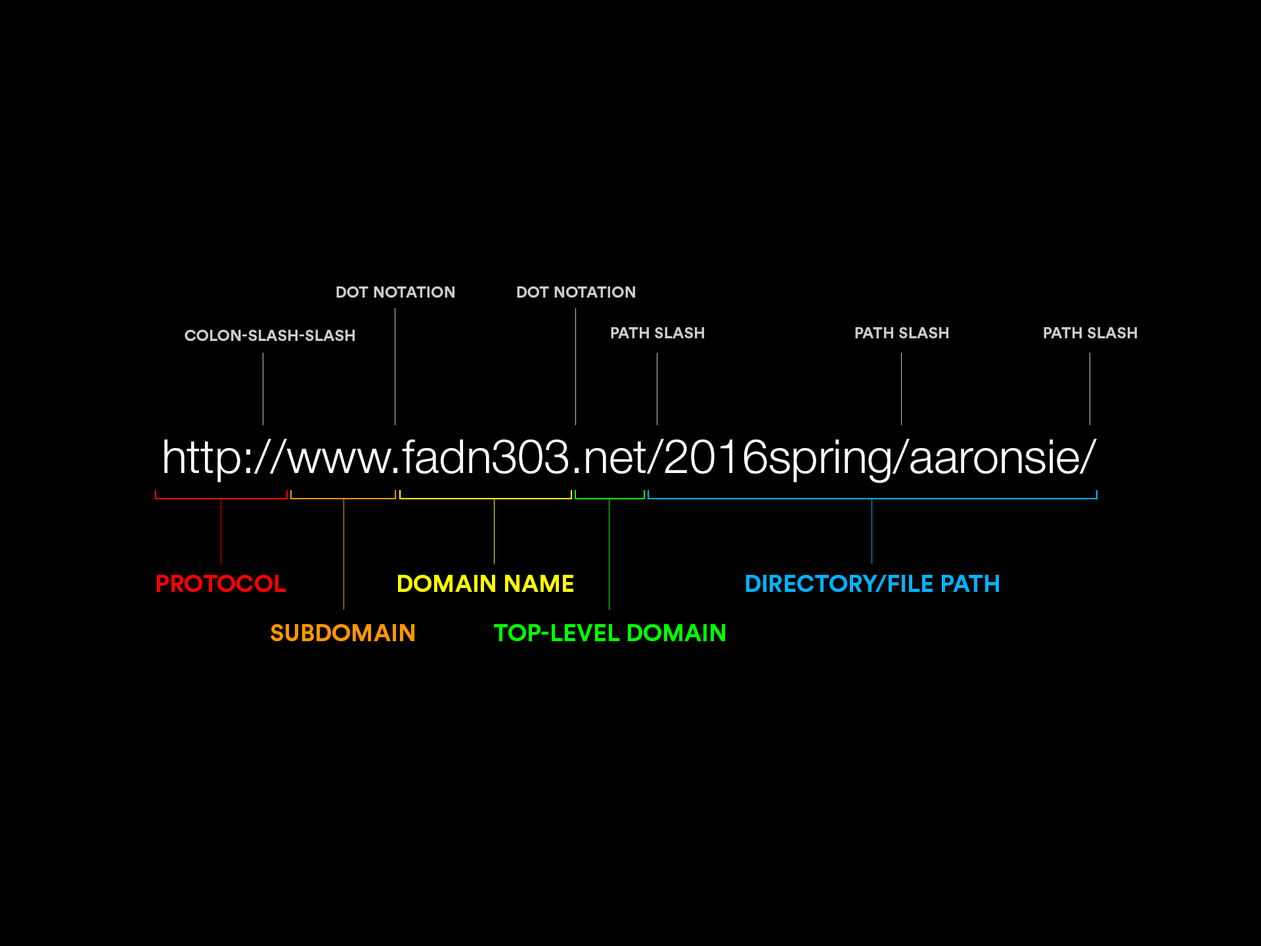
<style>
.page{position:relative;width:1261px;height:946px;background:#000000}
.page>*{position:absolute;margin:0}
.t1{font:15.8px "CircularStd-Bold";color:#cccccc;text-transform:uppercase}
.t2{font:47.3px "HelveticaNeueLTStd-Lt";color:#ffffff}
.t3{font:23.6px "CircularStd-Bold";color:#ff0000;text-transform:uppercase}
.t4{font:23.6px "CircularStd-Bold";color:#ffff00;text-transform:uppercase}
.t5{font:23.6px "CircularStd-Bold";color:#00b4ff;text-transform:uppercase}
.t6{font:23.6px "CircularStd-Bold";color:#ff9600;text-transform:uppercase}
.t7{font:23.6px "CircularStd-Bold";color:#00ff00;text-transform:uppercase}
</style>
<div class="page">
<p class="t1" style="left:336px;top:286px;width:118px;height:11px">DOT NOTATION</p>
<p class="t1" style="left:517px;top:286px;width:118px;height:11px">DOT NOTATION</p>
<p class="t1" style="left:185px;top:330px;width:170px;height:11px">colon-slash-slash</p>
<p class="t1" style="left:611px;top:327px;width:93px;height:11px">PATH SLASH</p>
<p class="t1" style="left:855px;top:327px;width:93px;height:11px">PATH SLASH</p>
<p class="t1" style="left:1044px;top:327px;width:93px;height:11px">PATH SLASH</p>
<p class="t2" style="left:164px;top:439px;width:933px;height:44px">http://www.fadn303.net/2016spring/aaronsie/</p>
<p class="t3" style="left:157px;top:575px;width:129px;height:17px">PROTOCOL</p>
<p class="t4" style="left:398px;top:575px;width:175px;height:17px">DOMAIN NAME</p>
<p class="t5" style="left:746px;top:575px;width:253px;height:17px">directory/file path</p>
<p class="t6" style="left:271px;top:624px;width:143px;height:17px">SUBDOMAIN</p>
<p class="t7" style="left:494px;top:624px;width:231px;height:17px">Top-level domain</p>
</div>
